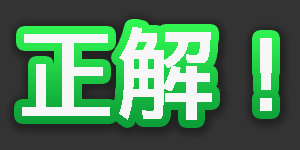
<style>
.page{position:relative;width:300px;height:150px;background:#333333}
.page>*{position:absolute;margin:0}
.t1{font:100px "mplus-1p-medium";color:#f7f7f7}
</style>
<div class="page">
<p class="t1" style="left:22px;top:27px;width:250px;height:93px">正解！</p>
</div>
